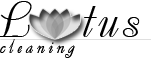
<style>
.page{position:relative;width:151px;height:59px;background:#ffffff}
.page>*{position:absolute;margin:0}
.t1{font:52.2px "RussianDecor";letter-spacing:0.1em;color:#000000}
.t2{font:19.6px "RussianDecor";letter-spacing:-0.075em;color:#010101}
</style>
<div class="page">
<p class="t1" style="left:0px;top:1px;width:140px;height:36px">L  tus</p>
<p class="t2" style="left:0px;top:39px;width:75px;height:19px">c l e a n i n g</p>
</div>
